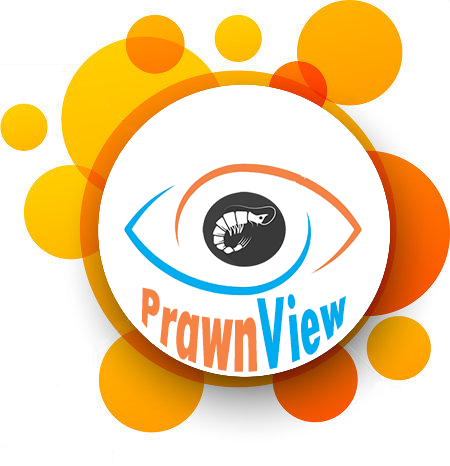
<style>
.page{position:relative;width:450px;height:466px;background:#ffffff}
.page>*{position:absolute;margin:0}
.t1{font:48px "TwCenMT-CondensedExtraBold";color:#f58345}
.t2{font:48px "TwCenMT-CondensedExtraBold";color:#00acee}
</style>
<div class="page">
<p class="t1" style="left:141px;top:287px;width:205px;height:85px;text-align:center">Prawn<span class="t2">View</span></p>
</div>
